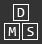
<style>
.page{position:relative;width:42px;height:44px;background:#333333}
.page>*{position:absolute;margin:0}
.t1{font:14px "Consolas";color:#ffffff}
</style>
<div class="page">
<p class="t1" style="left:17px;top:8px;width:8px;height:9px">D</p>
<p class="t1" style="left:8px;top:27px;width:8px;height:9px">M</p>
<p class="t1" style="left:27px;top:27px;width:7px;height:9px">S</p>
</div>
